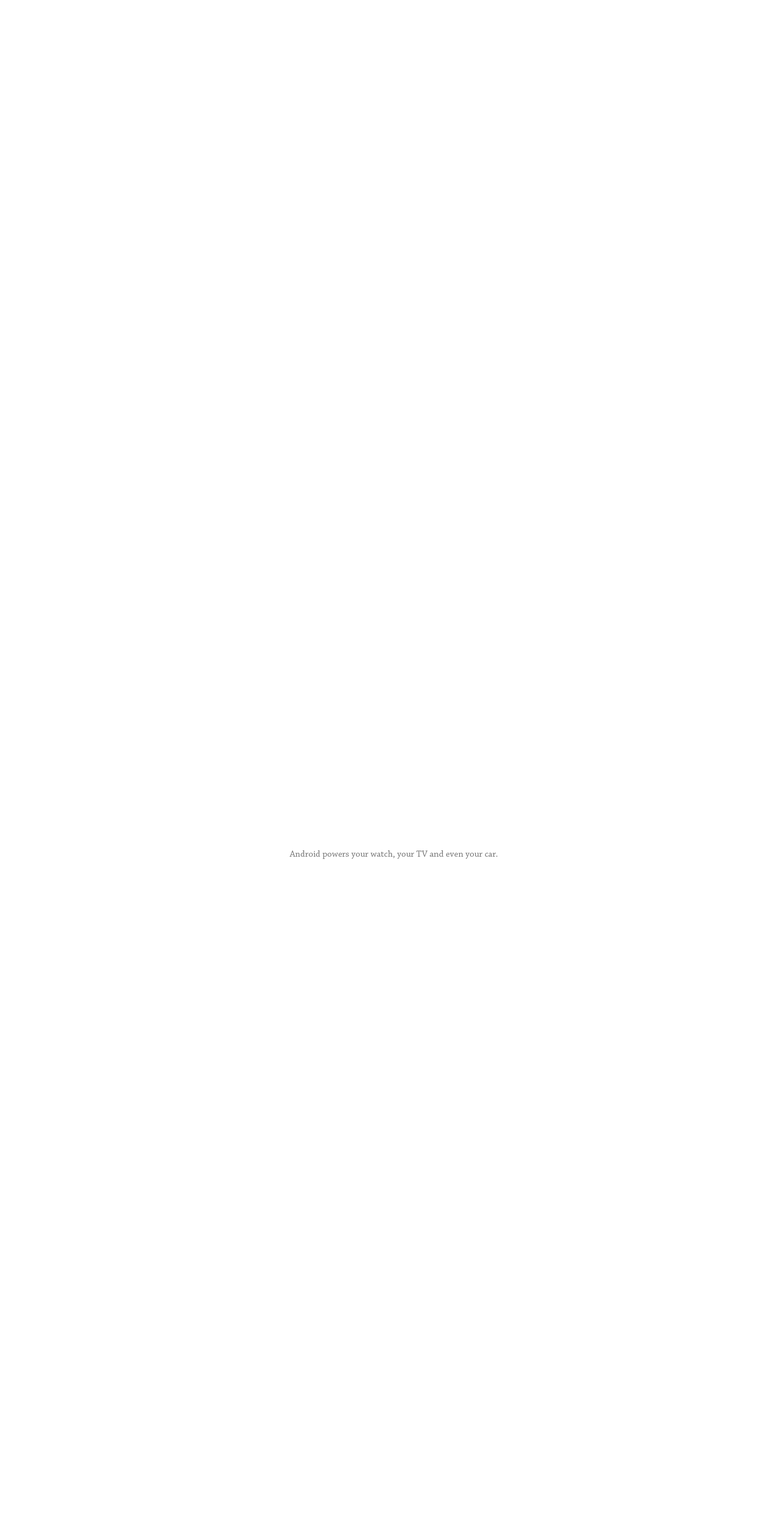
<style>
.page{position:relative;width:780px;height:1529px;background:#ffffff}
.page>*{position:absolute;margin:0}
.t1{font:9.1px "ChaparralPro-Regular";letter-spacing:0.005em;color:#7c7c7c}
</style>
<div class="page">
<p class="t1" style="left:289px;top:850px;width:208px;height:9px">Android powers your watch, your TV and even your car.</p>
</div>
